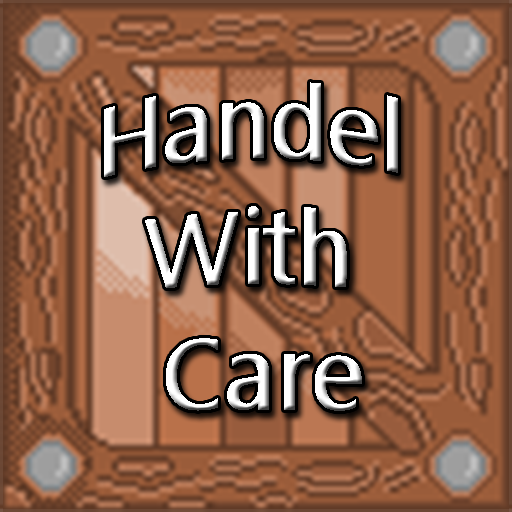
<style>
.page{position:relative;width:512px;height:512px}
.page>*{position:absolute;margin:0}
.t1{font:97.3px "SegoeUI";color:#ffffff}
</style>
<div class="page">
<p class="t1" style="left:104px;top:82px;width:294px;height:329px;text-align:center">Handel <br>With <br>Care</p>
</div>
